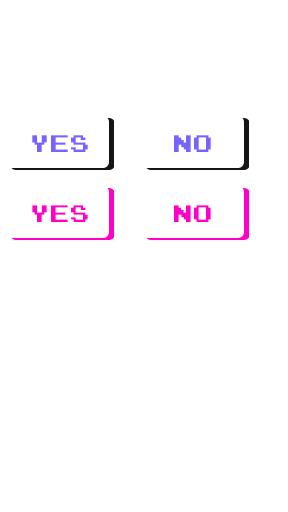
<style>
.page{position:relative;width:288px;height:512px;background:#ffffff}
.page>*{position:absolute;margin:0}
.t1{font:24px "JoystixMonospace-Regular";color:#7963fd}
.t2{font:24px "JoystixMonospace-Regular";color:#ff00c6}
</style>
<div class="page">
<p class="t1" style="left:32px;top:135px;width:56px;height:17px">yes</p>
<p class="t1" style="left:174px;top:135px;width:37px;height:17px">No</p>
<p class="t2" style="left:32px;top:205px;width:56px;height:17px">yes</p>
<p class="t2" style="left:174px;top:205px;width:37px;height:17px">No</p>
</div>
